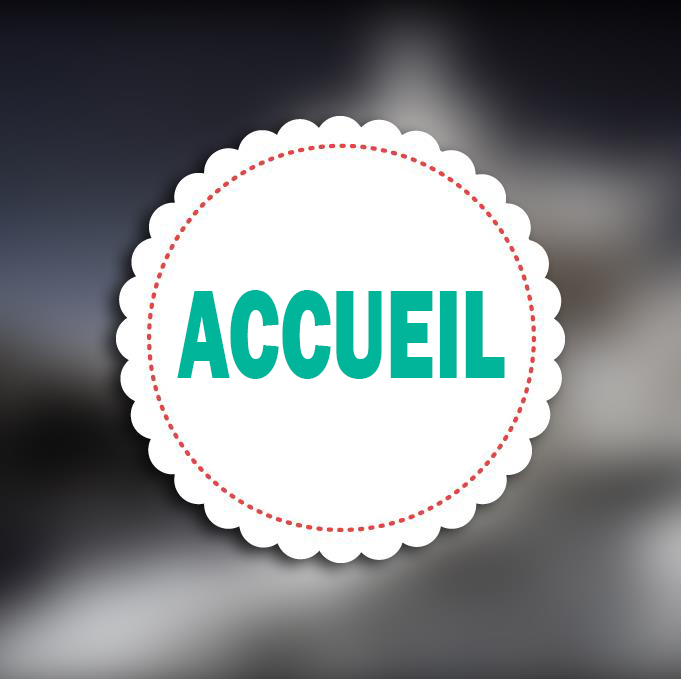
<style>
.page{position:relative;width:681px;height:679px;background:#ffffff}
.page>*{position:absolute;margin:0}
.t1{font:130px "FranklinGothic-Heavy";color:#00b59a;scale:0.64 1}
</style>
<div class="page">
<p class="t1" style="left:177px;top:290px;width:328px;height:89px">ACCUEIL</p>
</div>
